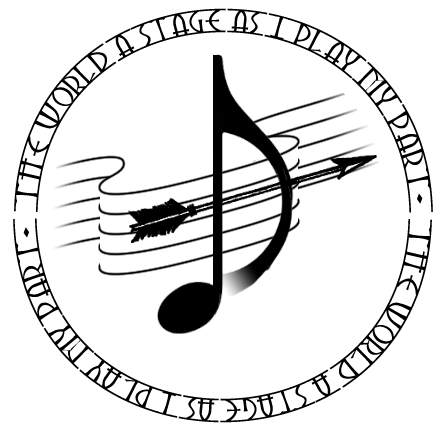
<style>
.page{position:relative;width:445px;height:435px;background:#ffffff}
.page>*{position:absolute;margin:0}
.t1{font:36px "AngarsRunesPERSONALUSEONLY";color:#000000}
</style>
<div class="page">
<p class="t1" style="left:14px;top:8px;width:419px;height:205px;text-align:center">the World a Stage as I Play My Part.</p>
<p class="t1" style="left:13px;top:218px;width:419px;height:205px;rotate:180deg">the World a Stage as I Play My Part.</p>
</div>
